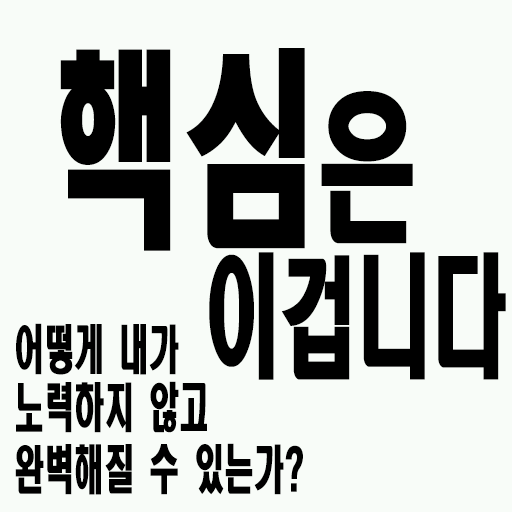
<style>
.page{position:relative;width:512px;height:512px;background:#f8fcf8}
.page>*{position:absolute;margin:0}
.t1{font:210.9px "HeadlineR-HM";color:#000000;scale:0.63 1}
.t2{font:161.5px "HeadlineR-HM";color:#000000;scale:0.63 1}
.t3{font:132.3px "HeadlineR-HM";color:#000000;scale:0.57 1}
.t4{font:52.5px "HeadlineR-HM";color:#000000;scale:0.57 1}
</style>
<div class="page">
<p class="t1" style="left:60px;top:48px;width:353px;height:203px">핵심<span class="t2">은</span></p>
<p class="t3" style="left:209px;top:252px;width:297px;height:128px">이겁니다</p>
<p class="t4" style="left:16px;top:323px;width:163px;height:52px">어떻게 내가</p>
<p class="t4" style="left:16px;top:381px;width:191px;height:52px">노력하지 않고</p>
<p class="t4" style="left:15px;top:443px;width:288px;height:52px">완벽해질 수 있는가?</p>
</div>
